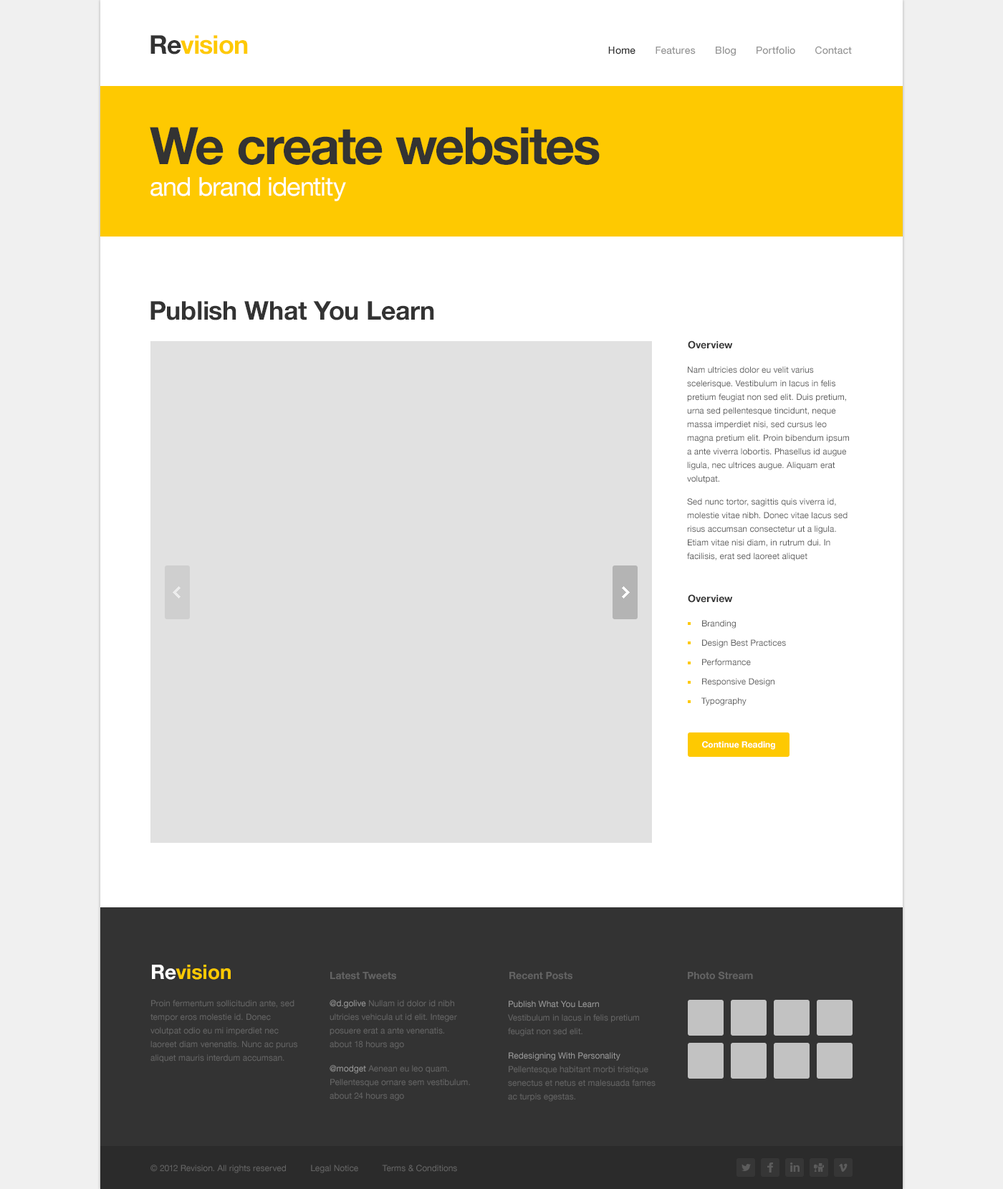
<style>
.page{position:relative;width:1003px;height:1189px;background:#ffffff}
.page>*{position:absolute;margin:0}
.t1{font:25.8px "HelveticaNeue-Bold";letter-spacing:-0.025em;color:#fec901}
.t2{font:25.8px "HelveticaNeue-Bold";letter-spacing:-0.025em;color:#333333}
.t3{font:10px "HelveticaNeue-Medium";color:#959595}
.t4{font:10px "HelveticaNeue-Medium";color:#333333}
.t5{font:51.6px "HelveticaNeue-Bold";letter-spacing:-0.025em;color:#333333}
.t6{font:25.8px "HelveticaNeue";letter-spacing:-0.025em;color:#ffffff}
.t7{font:25.8px "HelveticaNeue-Bold";letter-spacing:-0.01em;color:#333333}
.t8{font:10px "HelveticaNeue-Bold";color:#333333}
.t9{font:8.6px/13.6px "HelveticaNeue";color:#636363}
.t10{font:8.6px "HelveticaNeue-Bold";color:#ffffff}
.t11{font:20.1px "HelveticaNeue-Bold";color:#fec901}
.t12{font:20.1px "HelveticaNeue-Bold";color:#ffffff}
.t13{font:10px "HelveticaNeue-Bold";color:#636363}
.t14{font:8.6px/13.6px "HelveticaNeue";color:#959595}
.t15{font:8.6px "HelveticaNeue";color:#636363}
</style>
<div class="page">
<p class="t1" style="left:150px;top:35px;width:98px;height:19px"><span class="t2">Re</span>vision</p>
<p class="t3" style="left:608px;top:46px;width:244px;height:10px"><span class="t4">Home       </span>Features       Blog       Portfolio       Contact</p>
<p class="t5" style="left:150px;top:127px;width:450px;height:74px">We create websites<br><span class="t6">and brand identity</span></p>
<p class="t7" style="left:150px;top:301px;width:284px;height:19px">Publish What You Learn</p>
<p class="t8" style="left:688px;top:340px;width:45px;height:9px">Overview</p>
<p class="t9" style="left:687px;top:366px;width:162px;height:195px">Nam ultricies dolor eu velit varius scelerisque. Vestibulum in lacus in felis pretium feugiat non sed elit. Duis pretium, urna sed pellentesque tincidunt, neque massa imperdiet nisi, sed cursus leo magna pretium elit. Proin bibendum ipsum a ante viverra lobortis. Phasellus id augue ligula, nec ultrices augue. Aliquam erat volutpat.<br>Sed nunc tortor, sagittis quis viverra id, molestie vitae nibh. Donec vitae lacus sed risus accumsan consectetur ut a ligula. Etiam vitae nisi diam, in rutrum dui. In facilisis, erat sed laoreet aliquet</p>
<p class="t8" style="left:688px;top:594px;width:45px;height:9px">Overview</p>
<p class="t9" style="left:701px;top:620px;width:85px;height:86px">Branding<br>Design Best Practices<br>Performance<br>Responsive Design<br>Typography</p>
<p class="t10" style="left:702px;top:741px;width:73px;height:8px">Continue Reading</p>
<p class="t11" style="left:152px;top:964px;width:79px;height:15px"><span class="t12">Re</span>vision</p>
<p class="t13" style="left:330px;top:972px;width:66px;height:7px">Latest Tweets</p>
<p class="t13" style="left:509px;top:972px;width:64px;height:7px">Recent Posts</p>
<p class="t13" style="left:688px;top:971px;width:65px;height:8px">Photo Stream</p>
<p class="t9" style="left:150px;top:1000px;width:147px;height:63px">Proin fermentum sollicitudin ante, sed tempor eros molestie id. Donec volutpat odio eu mi imperdiet nec laoreet diam venenatis. Nunc ac purus aliquet mauris interdum accumsan.</p>
<p class="t9" style="left:330px;top:1000px;width:140px;height:101px"><span class="t14">@d.golive </span>Nullam id dolor id nibh ultricies vehicula ut id elit. Integer posuere erat a ante venenatis.<br>about 18 hours ago<br><span class="t14">@modget </span>Aenean eu leo quam. Pellentesque ornare sem vestibulum.<br>about 24 hours ago</p>
<p class="t9" style="left:508px;top:1000px;width:148px;height:101px"><span class="t14">Publish What You Learn<br></span>Vestibulum in lacus in felis pretium feugiat non sed elit.<br><span class="t14">Redesigning With Personality<br></span>Pellentesque habitant morbi tristique senectus et netus et malesuada fames ac turpis egestas.</p>
<p class="t15" style="left:150px;top:1164px;width:307px;height:9px">© 2012 Revision. All rights reserved          Legal Notice          Terms &amp; Conditions</p>
</div>
